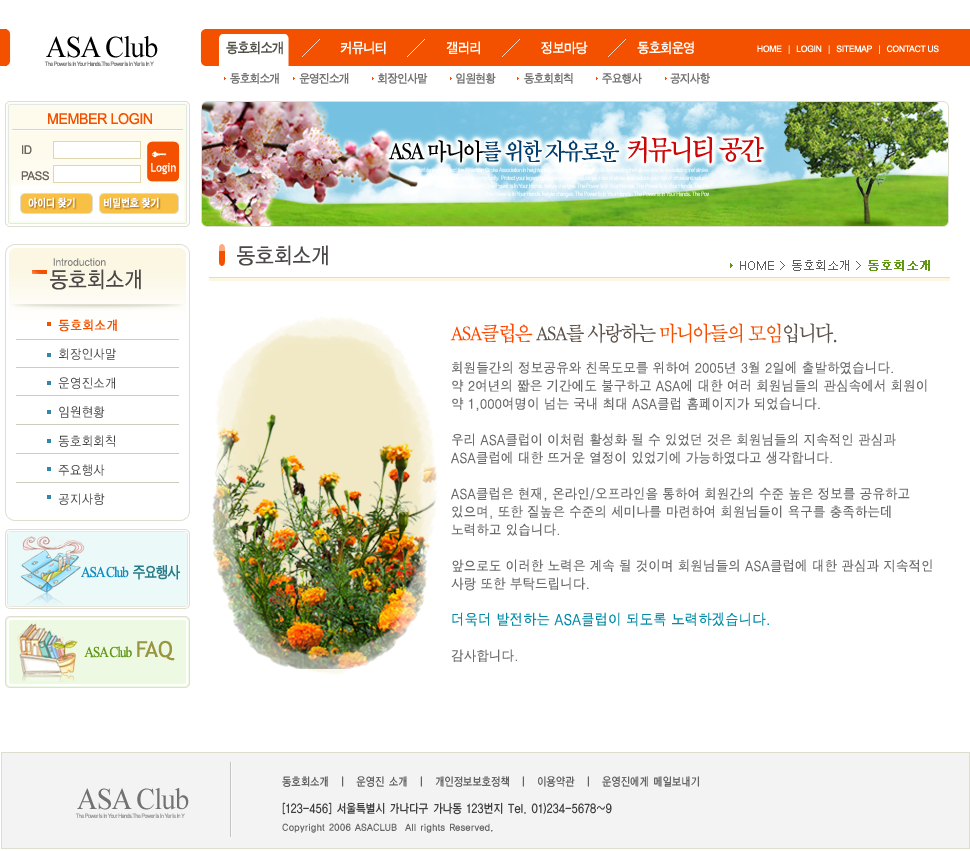
<style>
.page{position:relative;width:970px;height:851px;background:#ffffff}
.page>*{position:absolute;margin:0}
.t1{font:30px "TimesNewRomanPSMT";letter-spacing:-0.03em;color:#000000;scale:0.95 1}
.t2{font:14px "SandTg";letter-spacing:-0.03em;color:#ffffff;scale:0.95 1}
.t3{font:14px "SandTg";letter-spacing:-0.03em;color:#545249;scale:0.95 1}
.t4{font:9px "ArialMT";letter-spacing:-0.03em;color:#ffffff;scale:0.95 1}
.t5{font:12px "SandTg";letter-spacing:-0.03em;color:#757574;scale:0.95 1}
.t6{font:15px "ArialMT";letter-spacing:-0.03em;color:#f35000;scale:0.95 1}
.t7{font:25px "SandTm";letter-spacing:-0.075em;color:#003c6c;scale:0.88 1}
.t8{font:30px "TimesNewRomanPSMT";letter-spacing:-0.075em;color:#313131;scale:0.88 1}
.t9{font:25px "SandTm";letter-spacing:-0.075em;color:#000000;scale:0.88 1}
.t10{font:30px "SandTm";letter-spacing:-0.075em;color:#cb0707;scale:0.88 1}
.t11{font:12px/26px "ArialMT";letter-spacing:-0.03em;color:#6d6460;scale:0.95 1}
.t12{font:12px/24px "ArialMT";letter-spacing:-0.03em;color:#6d6460;scale:0.95 1}
.t13{font:12px "TrebuchetMS";color:#ffffff;scale:0.9 1}
.t14{font:11px "SandKg";color:#ffffff;scale:0.9 1}
.t15{font:22px "YGO12";letter-spacing:-0.06em;color:#4d4848;scale:0.9 1}
.t16{font:10px "YGO12";letter-spacing:-0.06em;color:#7b7b7b;scale:0.9 1}
.t17{font:12px "Dotum";color:#5c5c5c}
.t18{font:12px "Dotum";color:#629615;font-weight:bold}
.t19{font:13px/29px "YGO12";color:#424242;scale:0.9 1}
.t20{font:13px "YGO12";color:#f35000;font-weight:bold;scale:0.9 1}
.t21{font:14px/18px "Dotum";color:#6b6b6b;scale:0.9 1}
.t22{font:22px/21px "SandSm";letter-spacing:-0.05em;color:#ff4800;scale:0.9 1}
.t23{font:22px/21px "SandSm";letter-spacing:-0.05em;color:#5e534a;scale:0.9 1}
.t24{font:22px/21px "SandSm";letter-spacing:-0.05em;color:#f35000;scale:0.9 1}
.t25{font:14px/12px "Dotum";color:#6b6b6b;scale:0.9 1}
.t26{font:15px/18px "Dotum";color:#028aa6;scale:0.9 1}
.t27{font:15px "TimesNewRomanPSMT";letter-spacing:-0.075em;color:#0a8dc4;scale:0.88 1}
.t28{font:16px "SandTg";letter-spacing:-0.075em;color:#277b88;scale:0.88 1}
.t29{font:15px "TimesNewRomanPSMT";letter-spacing:-0.075em;color:#629615;scale:0.88 1}
.t30{font:18px "SandTg";letter-spacing:-0.075em;color:#629615;scale:0.88 1}
.t31{font:22px "TrebuchetMS";color:#999640}
.t32{font:11.6px "YGO12";letter-spacing:-0.025em;color:#585858;scale:0.83 1}
.t33{font:30px "TimesNewRomanPSMT";letter-spacing:-0.03em;color:#737272;scale:0.95 1}
.t34{font:12.1px/18px "YGO12";letter-spacing:-0.025em;color:#333232;scale:0.82 1}
.t35{font:9px/18px "YGO12";letter-spacing:-0.01em;color:#676767;scale:0.9 1}
</style>
<div class="page">
<p class="t1" style="left:46px;top:36px;width:112px;height:22px">ASA Club</p>
<p class="t2" style="left:226px;top:41px;width:468px;height:14px"><span class="t3">동호회소개 </span>                커뮤니티                  갤러리                  정보마당               동호회운영</p>
<p class="t4" style="left:757px;top:45px;width:182px;height:9px">HOME   |   LOGIN   |   SITEMAP   |   CONTACT US</p>
<p class="t5" style="left:230px;top:73px;width:480px;height:11px">동호회소개       운영진소개          회장인사말          임원현황          동호회회칙          주요행사          공지사항</p>
<p class="t6" style="left:48px;top:113px;width:104px;height:12px">MEMBER LOGIN</p>
<p class="t7" style="left:388px;top:136px;width:376px;height:28px"><span class="t8">                                     <br></span><span class="t9">ASA 마니아</span>를 위한 자유로운  <span class="t10">커뮤니티 공간</span></p>
<p class="t11" style="left:21px;top:145px;width:28px;height:36px"><span class="t12">ID<br></span>PASS</p>
<p class="t13" style="left:151px;top:163px;width:25px;height:12px">Login</p>
<p class="t14" style="left:28px;top:197px;width:131px;height:11px">아이디 찾기          비밀번호 찾기</p>
<p class="t15" style="left:237px;top:245px;width:91px;height:21px">동호회소개</p>
<p class="t15" style="left:50px;top:269px;width:91px;height:21px">동호회소개</p>
<p class="t16" style="left:53px;top:258px;width:53px;height:8px">Introduction</p>
<p class="t17" style="left:740px;top:260px;width:190px;height:11px">HOME &gt; 동호회소개 &gt; <span class="t18">동호회소개</span></p>
<p class="t19" style="left:58px;top:319px;width:59px;height:186px"><span class="t20">동호회소개<br></span>회장인사말<br>운영진소개<br>임원현황<br>동호회회칙<br>주요행사<br>공지사항</p>
<p class="t21" style="left:450px;top:323px;width:482px;height:339px"><span class="t22">ASA클럽은 </span><span class="t23">ASA를 사랑하는 </span><span class="t24">마니아들의 모임</span><span class="t23">입니다.<br><br></span><span class="t25">회원들간의 정보공유와 친목도모를 위하여 2005년 3월 2일에 출발하였습니다.<br></span>약 2여년의 짧은 기간에도 불구하고 ASA에 대한 여러 회원님들의 관심속에서 회원이 <br>약 1,000여명이 넘는 국내 최대 ASA클럽 홈페이지가 되었습니다.<br><br>우리 ASA클럽이 이처럼 활성화 될 수 있었던 것은 회원님들의 지속적인 관심과 <br>ASA클럽에 대한 뜨거운 열정이 있었기에 가능하였다고 생각합니다.<br><br>ASA클럽은 현재, 온라인/오프라인을 통하여 회원간의 수준 높은 정보를 공유하고 <br>있으며, 또한 질높은 수준의 세미나를 마련하여 회원님들이 욕구를 충족하는데 <br>노력하고 있습니다.<br><br>앞으로도 이러한 노력은 계속 될 것이며 회원님들의 ASA클럽에 대한 관심과 지속적인 <br>사랑 또한 부탁드립니다.<br><span class="t26"><br>더욱더 발전하는 ASA클럽이 되도록 노력하겠습니다.<br><br></span>감사합니다.</p>
<p class="t27" style="left:81px;top:565px;width:99px;height:15px">ASA Club  <span class="t28">주요행사</span></p>
<p class="t29" style="left:84px;top:640px;width:91px;height:21px"><span class="t30">     </span>ASA Club  <span class="t31">FAQ</span></p>
<p class="t32" style="left:282px;top:776px;width:417px;height:11px">동호회소개  ㅣ  운영진 소개  ㅣ  개인정보보호정책  ㅣ  이용약관  ㅣ  운영진에게 메일보내기</p>
<p class="t33" style="left:77px;top:788px;width:112px;height:22px">ASA Club</p>
<p class="t34" style="left:282px;top:802px;width:330px;height:31px">[123-456] 서울특별시 가나다구 가나동 123번지 Tel. 01)234-5678~9<br><span class="t35">Copyright 2006 ASACLUB  All rights Reserved.</span></p>
</div>
